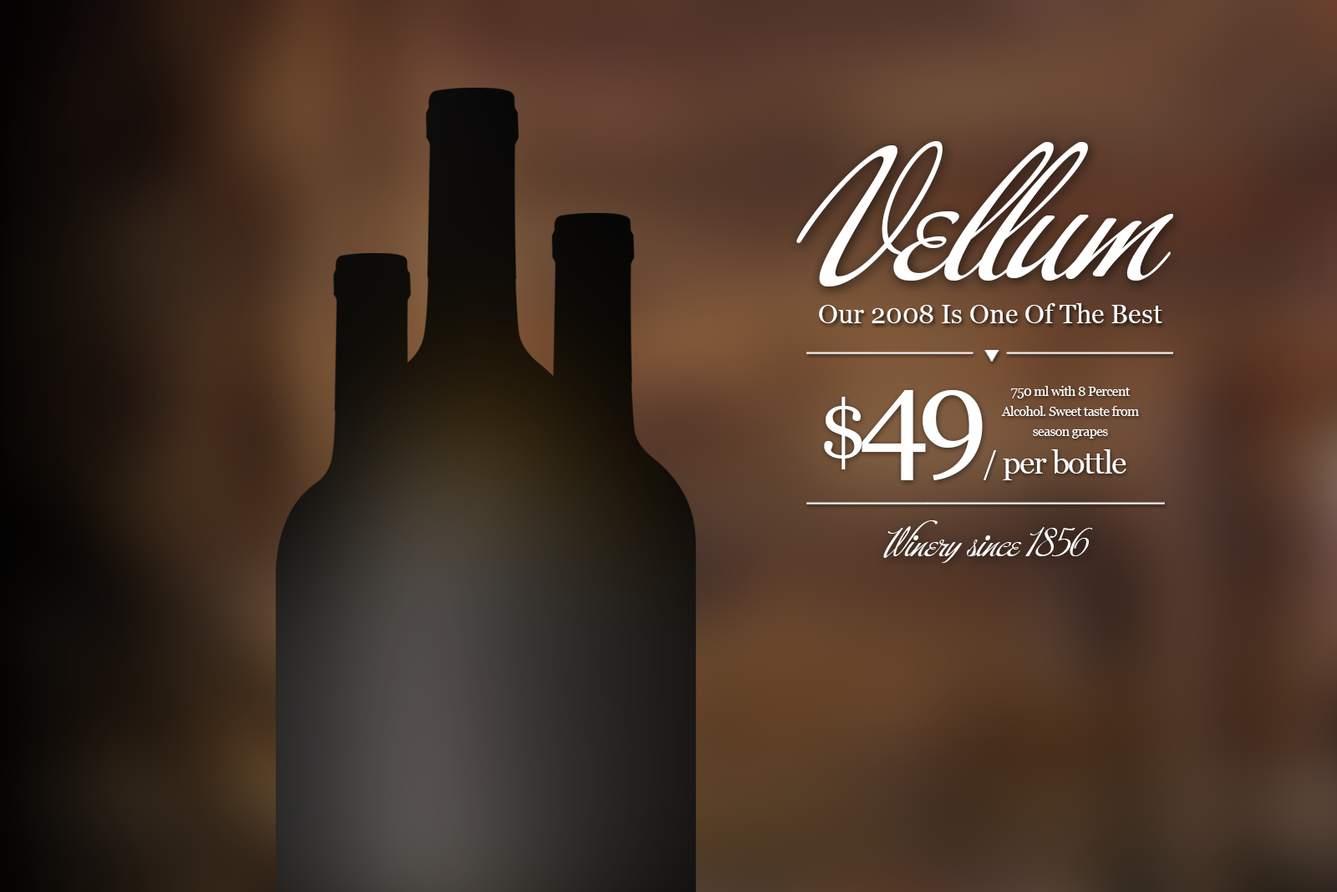
<style>
.page{position:relative;width:1337px;height:892px}
.page>*{position:absolute;margin:0}
.t1{font:147.9px "BuffetScript";color:#ffffff}
.t2{font:26.7px "Georgia";color:#ffffff}
.t3{font:13.4px/20px "Georgia";letter-spacing:-0.04em;color:#ffffff}
.t4{font:125.3px "Georgia";letter-spacing:-0.1em;color:#ffffff}
.t5{font:81px "Georgia";letter-spacing:-0.1em;color:#ffffff}
.t6{font:31.7px "Georgia";letter-spacing:-0.04em;color:#ffffff}
.t7{font:31.7px "BuffetScript";color:#ffffff}
</style>
<div class="page">
<p class="t1" style="left:796px;top:141px;width:377px;height:146px">Vellum</p>
<p class="t2" style="left:819px;top:303px;width:343px;height:20px">Our 2008 Is One Of The Best</p>
<p class="t3" style="left:1001px;top:386px;width:138px;height:53px;text-align:center">750 ml with 8 Percent<br>Alcohol. Sweet taste from<br>season grapes</p>
<p class="t4" style="left:824px;top:390px;width:158px;height:90px"><span class="t5">$</span>49</p>
<p class="t6" style="left:983px;top:449px;width:143px;height:31px">/ per bottle</p>
<p class="t7" style="left:883px;top:520px;width:210px;height:43px">Winery since 1856</p>
</div>
